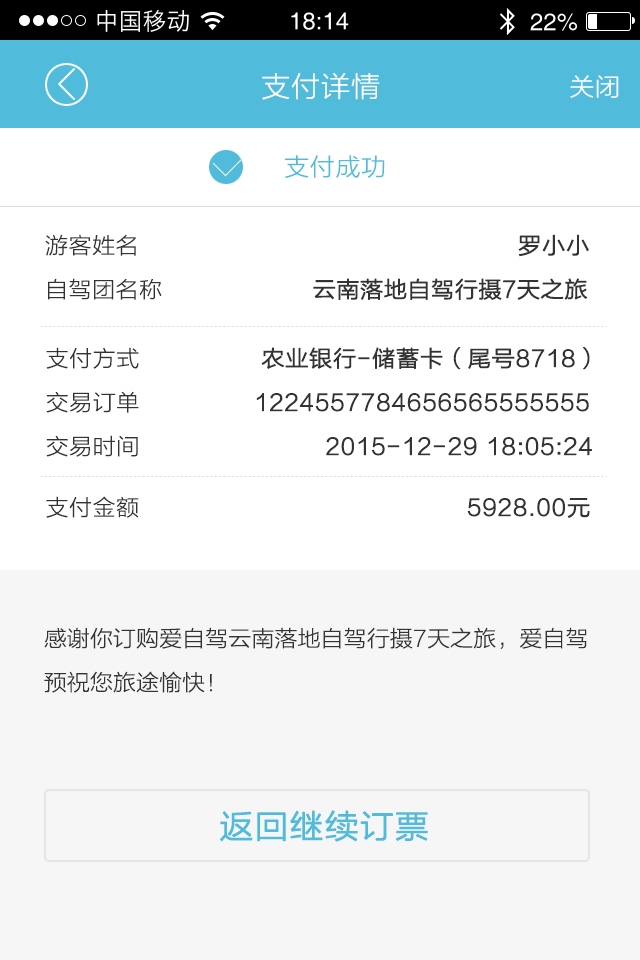
<style>
.page{position:relative;width:640px;height:960px;background:#ffffff}
.page>*{position:absolute;margin:0}
.t1{font:28px "STHeitiSC-Light";letter-spacing:-0.04em;color:#ffffff;scale:1.03 1}
.t2{font:24px "STHeitiSC-Light";letter-spacing:-0.04em;color:#ffffff;scale:1.03 1}
.t3{font:24px "STHeitiSC-Light";letter-spacing:-0.04em;color:#50bbdb;scale:1.03 1}
.t4{font:22px/44px "STHeitiSC-Light";letter-spacing:-0.06em;color:#333333;font-weight:bold;scale:1.03 1}
.t5{font:22px/44px "STHeitiSC-Light";letter-spacing:-0.04em;color:#333333;scale:1.03 1}
.t6{font:22px/44px "STHeitiSC-Light";letter-spacing:-0.04em;color:#333333;font-weight:bold;scale:1.03 1}
.t7{font:22px/44px "STHeitiSC-Light";letter-spacing:-0.05em;color:#333333;font-weight:bold;scale:1.03 1}
.t8{font:22px "STHeitiSC-Light";letter-spacing:-0.04em;color:#333333;font-weight:bold;scale:1.03 1}
.t9{font:22px "STHeitiSC-Light";letter-spacing:-0.04em;color:#333333;scale:1.03 1}
.t10{font:22px/44px "STHeitiSC-Light";letter-spacing:-0.06em;color:#333333;scale:1.03 1}
.t11{font:32px "STHeitiSC-Light";letter-spacing:-0.04em;color:#50bbdb;font-weight:bold;scale:1.03 1}
</style>
<div class="page">
<p class="t1" style="left:262px;top:73px;width:118px;height:27px">支付详情</p>
<p class="t2" style="left:570px;top:75px;width:49px;height:23px">关闭</p>
<p class="t3" style="left:285px;top:155px;width:100px;height:23px">支付成功</p>
<p class="t4" style="left:45px;top:234px;width:544px;height:66px"><span class="t5">游客姓名                                                     </span><span class="t6">罗小小<br></span><span class="t5">自驾团名称                     </span>云南落地自驾行摄7天之旅</p>
<p class="t6" style="left:46px;top:347px;width:546px;height:110px"><span class="t5">支付方式                 </span><span class="t7">农业银行-储蓄卡（尾号8718）<br></span><span class="t5">交易订单                </span>1224557784656565555555<br><span class="t5">交易时间                          </span>2015-12-29 18:05:24</p>
<p class="t8" style="left:46px;top:496px;width:544px;height:22px"><span class="t9">支付金额                                          </span>5928.00元</p>
<p class="t10" style="left:44px;top:627px;width:543px;height:66px">感谢你订购爱自驾云南落地自驾行摄7天之旅，爱自驾<br>预祝您旅途愉快！</p>
<p class="t11" style="left:220px;top:810px;width:208px;height:32px">返回继续订票</p>
</div>
